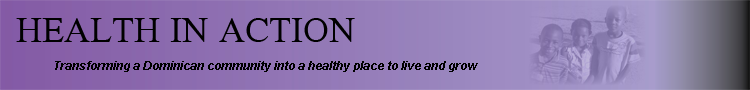
<style>
.page{position:relative;width:750px;height:90px}
.page>*{position:absolute;margin:0}
.t1{font:36px "DavidTransparent";color:#000000}
.t2{font:12px "Arial-BoldItalicMT";color:#000000}
</style>
<div class="page">
<p class="t1" style="left:16px;top:18px;width:339px;height:24px">HEALTH IN ACTION</p>
<p class="t2" style="left:55px;top:61px;width:423px;height:11px">Transforming a Dominican community into a healthy place to live and grow</p>
</div>
